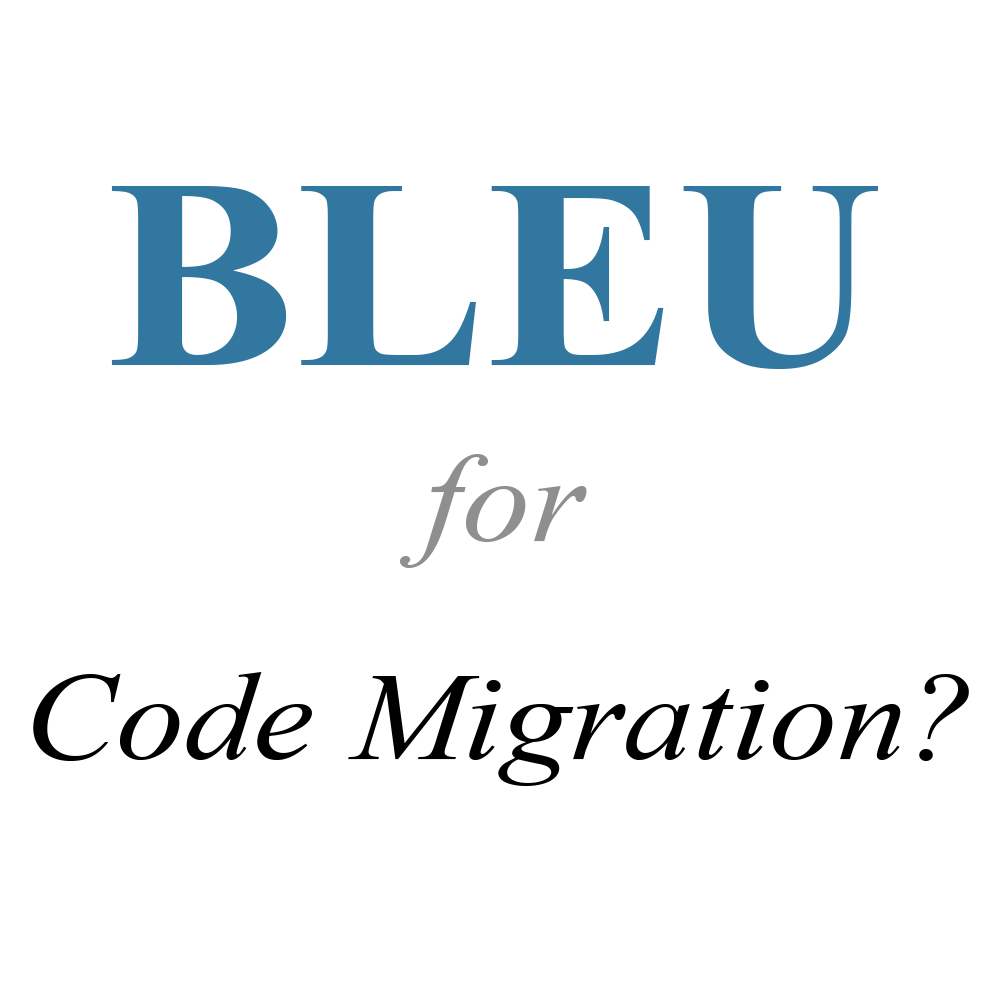
<style>
.page{position:relative;width:1000px;height:1000px;background:#ffffff}
.page>*{position:absolute;margin:0}
.t1{font:271px "TimesNewRomanPS-BoldMT";color:#32779f;scale:1.05 1}
.t2{font:125px "TimesNewRomanPS-ItalicMT";color:#8f8f8f;scale:1.1 1}
.t3{font:125px "TimesNewRomanPS-ItalicMT";color:#000000;scale:1.1 1}
</style>
<div class="page">
<p class="t1" style="left:111px;top:186px;width:767px;height:183px">BLEU</p>
<p class="t2" style="left:400px;top:454px;width:187px;height:114px">for</p>
<p class="t3" style="left:33px;top:672px;width:936px;height:114px">Code Migration?</p>
</div>
